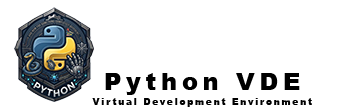
<style>
.page{position:relative;width:350px;height:110px;background:#ffffff}
.page>*{position:absolute;margin:0}
.t1{font:9px/15px "Arial-Black";letter-spacing:0.2em;color:#000000}
.t2{font:24px/15px "Arial-Black";letter-spacing:0.2em;color:#000000}
</style>
<div class="page">
<p class="t1" style="left:92px;top:73px;width:220px;height:34px;text-align:center"><span class="t2">Python VDE<br></span>Virtual Development Environment</p>
</div>
